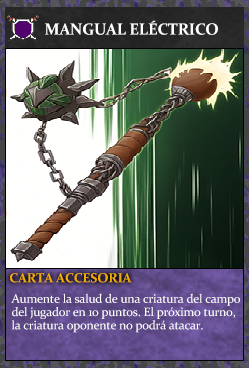
<style>
.page{position:relative;width:249px;height:368px}
.page>*{position:absolute;margin:0}
.t1{font:16px "Constantia-Bold";letter-spacing:-0.02em;color:#ffffff}
.t2{font:13.3px "Constantia-Bold";letter-spacing:-0.02em;color:#f2ac05}
.t3{font:12.3px/13.3px "Constantia";letter-spacing:-0.02em;color:#ffffff}
</style>
<div class="page">
<p class="t1" style="left:45px;top:20px;width:173px;height:15px">MANGUAL ELÉCTRICO</p>
<p class="t2" style="left:10px;top:273px;width:122px;height:10px">CARTA ACCESORIA</p>
<p class="t3" style="left:11px;top:293px;width:229px;height:40px">Aumente la salud de una criatura del campo<br>del jugador en 10 puntos. El próximo turno,<br>la criatura oponente no podrá atacar.</p>
</div>
